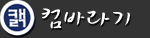
<style>
.page{position:relative;width:150px;height:38px;background:#333333}
.page>*{position:absolute;margin:0}
.t1{font:24px "³­ÃÊÃ¼";color:#ffffff}
</style>
<div class="page">
<p class="t1" style="left:41px;top:8px;width:89px;height:21px">컴바라기</p>
</div>
